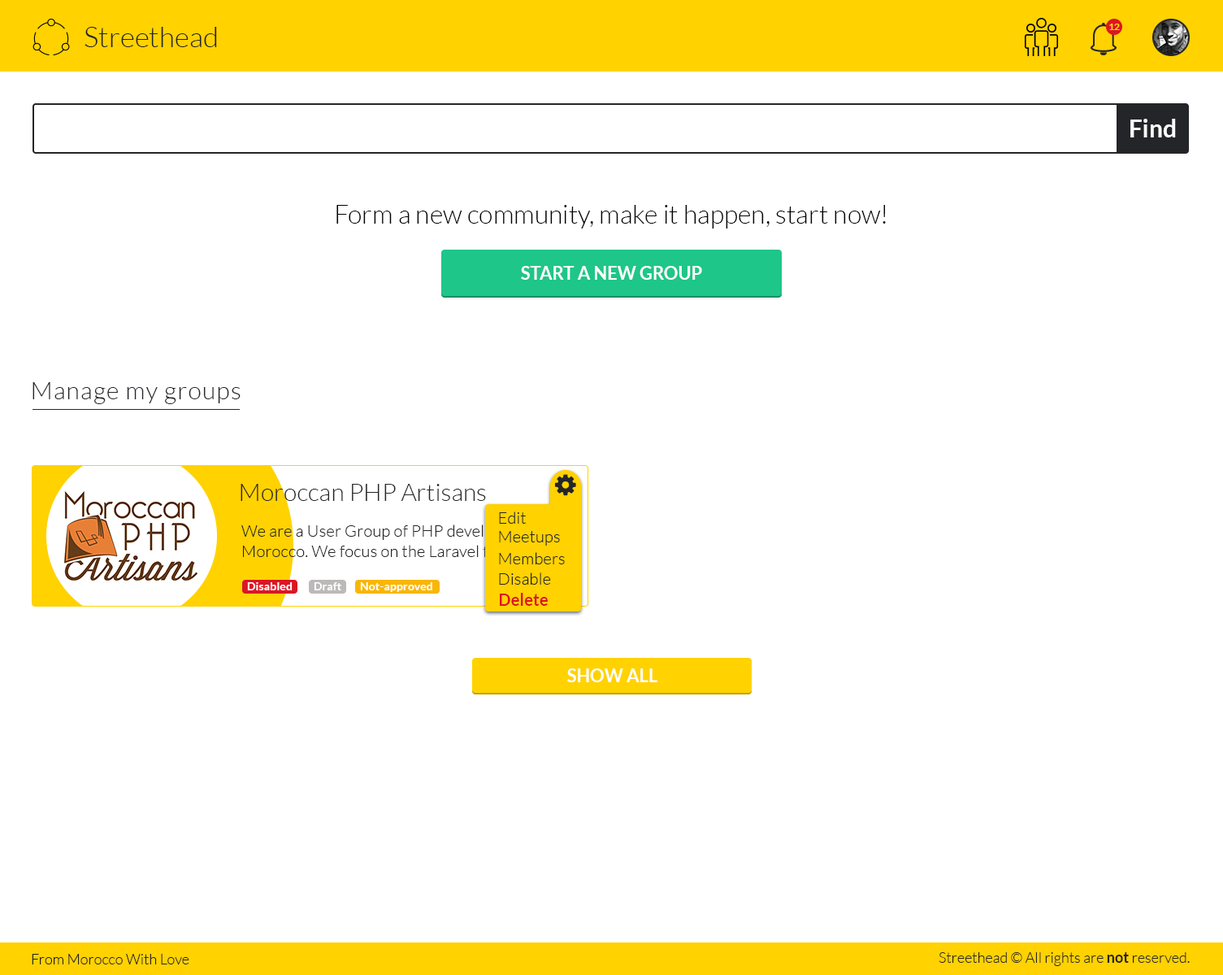
<style>
.page{position:relative;width:1223px;height:975px;background:#ffffff}
.page>*{position:absolute;margin:0}
.t1{font:28.5px "Lato-Light";color:#242528}
.t2{font:9.8px "Lato-Bold";color:#ffd200}
.t3{font:24.4px "Lato-Bold";color:#fcfcfc}
.t4{font:26px "Lato-Light";color:#000000}
.t5{font:17.9px "Lato-Bold";color:#ffffff}
.t6{font:24.4px "Lato-Light";letter-spacing:0.04em;color:#242528}
.t7{font:24.4px "Lato-Light";color:#242528}
.t8{font:16.3px "Lato-Light";letter-spacing:0.01em;color:#242528}
.t9{font:16.3px/20.3px "Lato-Light";letter-spacing:0.01em;color:#242528}
.t10{font:11.4px "Lato-Bold";letter-spacing:0.01em;color:#ffffff}
.t11{font:16.3px "Lato-Bold";letter-spacing:0.01em;color:#dc1623}
.t12{font:14.6px "Lato-Light";color:#242528}
.t13{font:14.6px "Lato-Bold";color:#242528}
</style>
<div class="page">
<p class="t1" style="left:85px;top:27px;width:132px;height:20px">Streethead</p>
<p class="t2" style="left:1110px;top:24px;width:10px;height:6px">12</p>
<p class="t3" style="left:1131px;top:119px;width:45px;height:18px">Find</p>
<p class="t4" style="left:337px;top:205px;width:549px;height:23px">Form a new community, make it happen, start now!</p>
<p class="t5" style="left:521px;top:266px;width:181px;height:14px">START A NEW GROUP</p>
<p class="t6" style="left:33px;top:382px;width:208px;height:22px">Manage my groups</p>
<p class="t7" style="left:241px;top:484px;width:245px;height:17px">Moroccan PHP Artisans</p>
<p class="t8" style="left:499px;top:511px;width:28px;height:13px">Edit</p>
<p class="t9" style="left:241px;top:524px;width:322px;height:33px">We are a User Group of PHP developers from <br>Morocco. We focus on the Laravel framework.</p>
<p class="t8" style="left:499px;top:531px;width:61px;height:14px">Meetups</p>
<p class="t8" style="left:499px;top:552px;width:66px;height:12px">Members</p>
<p class="t8" style="left:499px;top:572px;width:52px;height:12px">Disable</p>
<p class="t10" style="left:247px;top:582px;width:46px;height:8px">Disabled</p>
<p class="t10" style="left:314px;top:582px;width:27px;height:8px">Draft</p>
<p class="t10" style="left:360px;top:582px;width:72px;height:10px">Not-approved</p>
<p class="t11" style="left:500px;top:593px;width:48px;height:13px">Delete</p>
<p class="t5" style="left:567px;top:668px;width:91px;height:14px">SHOW ALL</p>
<p class="t12" style="left:32px;top:954px;width:157px;height:10px">From Morocco With Love</p>
<p class="t12" style="left:939px;top:952px;width:251px;height:14px">Streethead © All rights are <span class="t13">not </span>reserved.</p>
</div>
